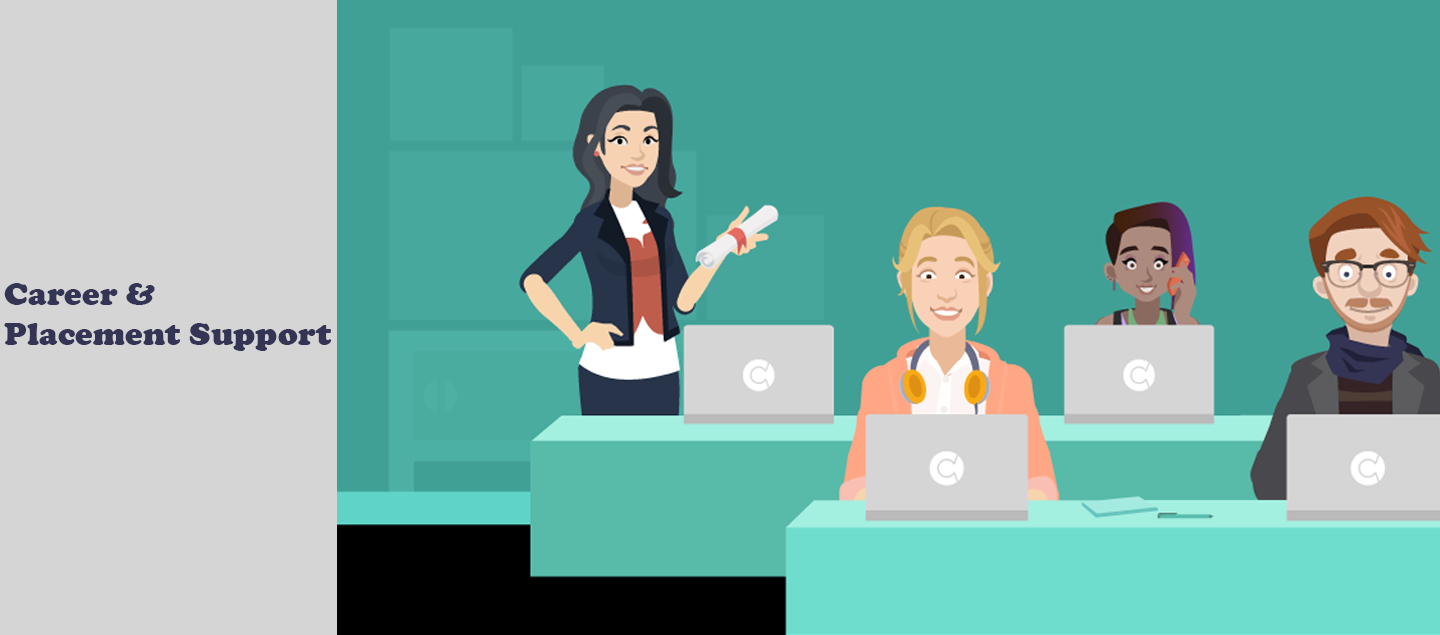
<style>
.page{position:relative;width:1440px;height:635px;background:#41a096}
.page>*{position:absolute;margin:0}
.t1{font:33.3px "CooperBlack";color:#343454}
</style>
<div class="page">
<p class="t1" style="left:4px;top:283px;width:327px;height:68px">Career &amp; <br>Placement Support</p>
</div>
